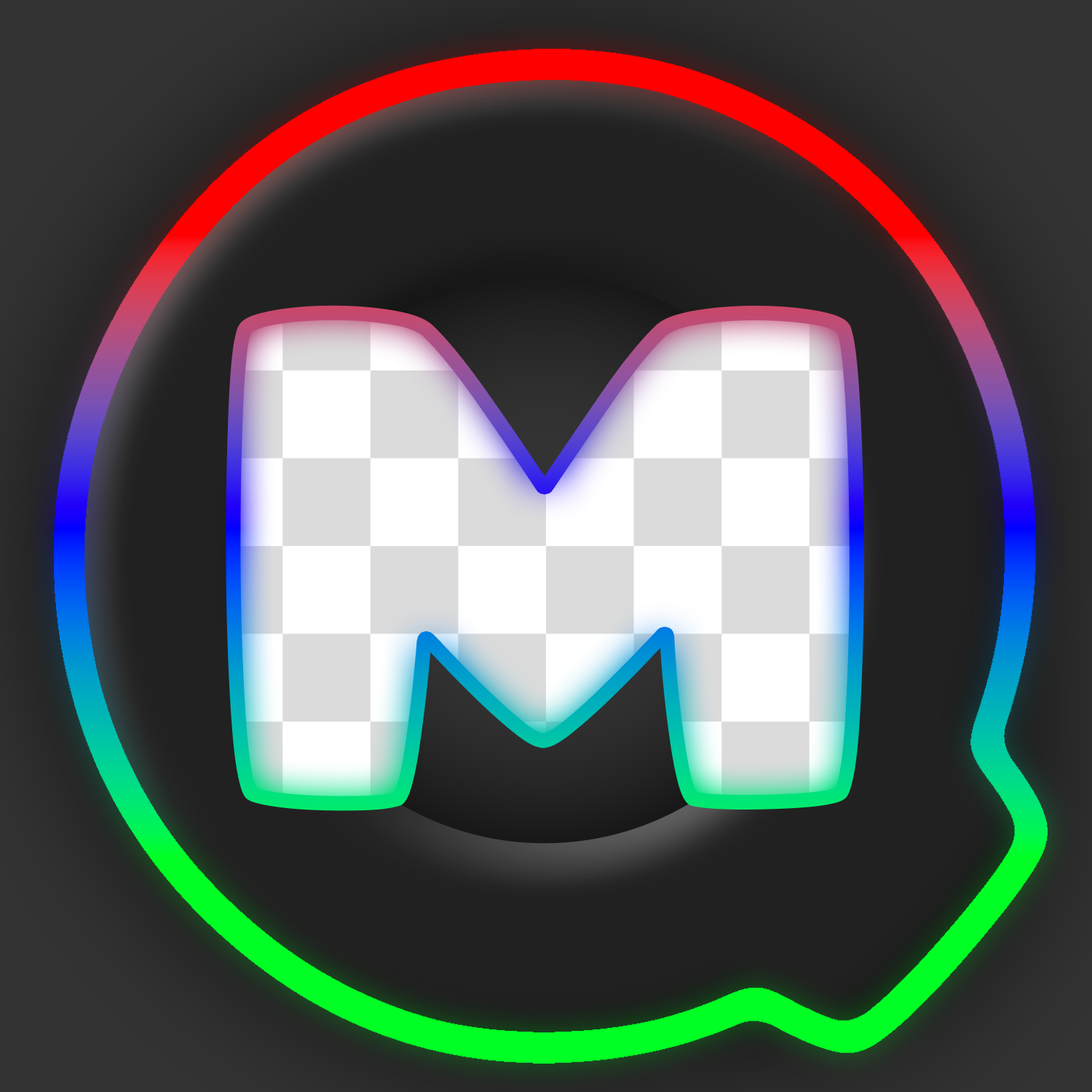
<style>
.page{position:relative;width:1092px;height:1092px}
.page>*{position:absolute;margin:0}
.t1{font:661.8px "ARCO-Typography-Regular";letter-spacing:0.06em}
</style>
<div class="page">
<p class="t1" style="left:231px;top:310px;width:628px;height:496px">m</p>
</div>
